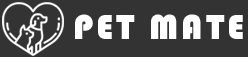
<style>
.page{position:relative;width:248px;height:57px;background:#333333}
.page>*{position:absolute;margin:0}
.t1{font:36px "Bauhaus93";letter-spacing:0.08em;color:#ffffff;text-transform:uppercase}
</style>
<div class="page">
<p class="t1" style="left:75px;top:14px;width:168px;height:25px">pet mate</p>
</div>
